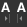
<style>
.page{position:relative;width:27px;height:27px;background:#333333}
.page>*{position:absolute;margin:0}
.t1{font:13px "Helvetica-Bold";color:#ffffff}
</style>
<div class="page">
<p class="t1" style="left:1px;top:2px;width:25px;height:10px">A  A</p>
</div>
